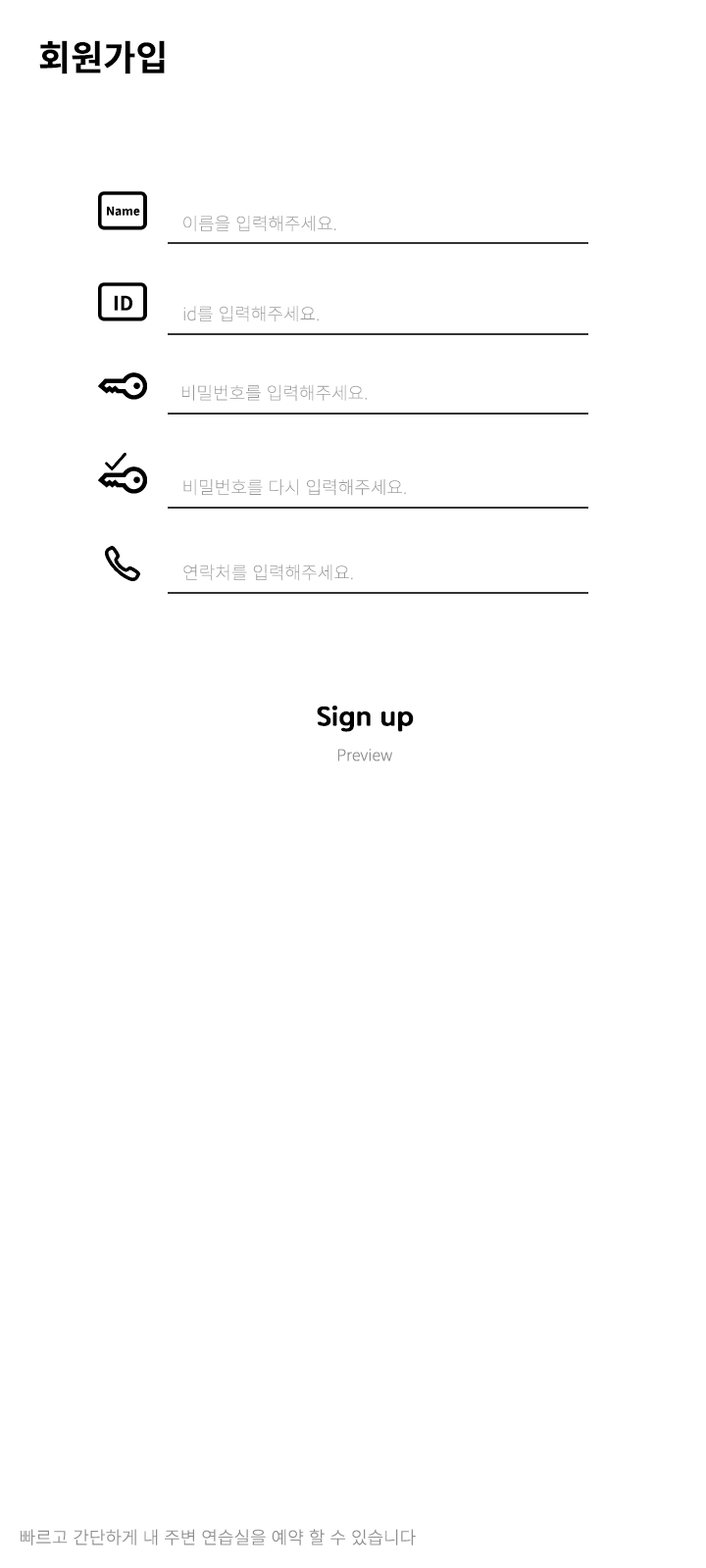
<style>
.page{position:relative;width:706px;height:1568px;background:#ffffff}
.page>*{position:absolute;margin:0}
.t1{font:35.3px "NotoSansCJKkr-Bold";color:#000000}
.t2{font:11.8px "NotoSansCJKkr-Bold";color:#000000}
.t3{font:17.6px "NotoSansCJKkr-Thin";color:#999999}
.t4{font:19.6px "NotoSansCJKkr-Bold";color:#000000}
.t5{font:25.5px "Binggrae-Bold";color:#000000}
.t6{font:15.7px "NotoSansCJKkr-Light";color:#8d8d8d}
.t7{font:17.6px "NotoSansCJKkr-Light";color:#8d8d8d}
</style>
<div class="page">
<p class="t1" style="left:39px;top:40px;width:126px;height:34px">회원가입</p>
<p class="t2" style="left:107px;top:206px;width:33px;height:10px">Name</p>
<p class="t3" style="left:183px;top:216px;width:153px;height:15px">이름을 입력해주세요.</p>
<p class="t4" style="left:114px;top:295px;width:18px;height:16px">ID</p>
<p class="t3" style="left:183px;top:306px;width:135px;height:16px">id를 입력해주세요.</p>
<p class="t3" style="left:182px;top:384px;width:185px;height:17px">비밀번호를 입력해주세요.</p>
<p class="t3" style="left:183px;top:479px;width:223px;height:17px">비밀번호를 다시 입력해주세요.</p>
<p class="t3" style="left:183px;top:564px;width:170px;height:17px">연락처를 입력해주세요.</p>
<p class="t5" style="left:317px;top:706px;width:97px;height:26px">Sign up</p>
<p class="t6" style="left:338px;top:749px;width:54px;height:12px">Preview</p>
<p class="t7" style="left:21px;top:1529px;width:395px;height:16px">빠르고 간단하게 내 주변 연습실을 예약 할 수 있습니다</p>
</div>
